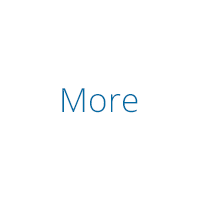
<style>
.page{position:relative;width:200px;height:200px;background:#ffffff}
.page>*{position:absolute;margin:0}
.t1{font:33.3px "OpenSans-Light";color:#006ba4}
</style>
<div class="page">
<p class="t1" style="left:62px;top:88px;width:76px;height:25px">More</p>
</div>
